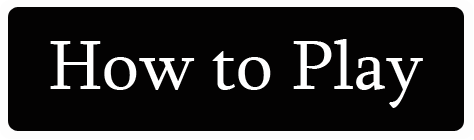
<style>
.page{position:relative;width:474px;height:140px;background:#030202}
.page>*{position:absolute;margin:0}
.t1{font:72px "Sylfaen";color:#ffffff}
</style>
<div class="page">
<p class="t1" style="left:50px;top:39px;width:373px;height:69px">How to Play</p>
</div>
